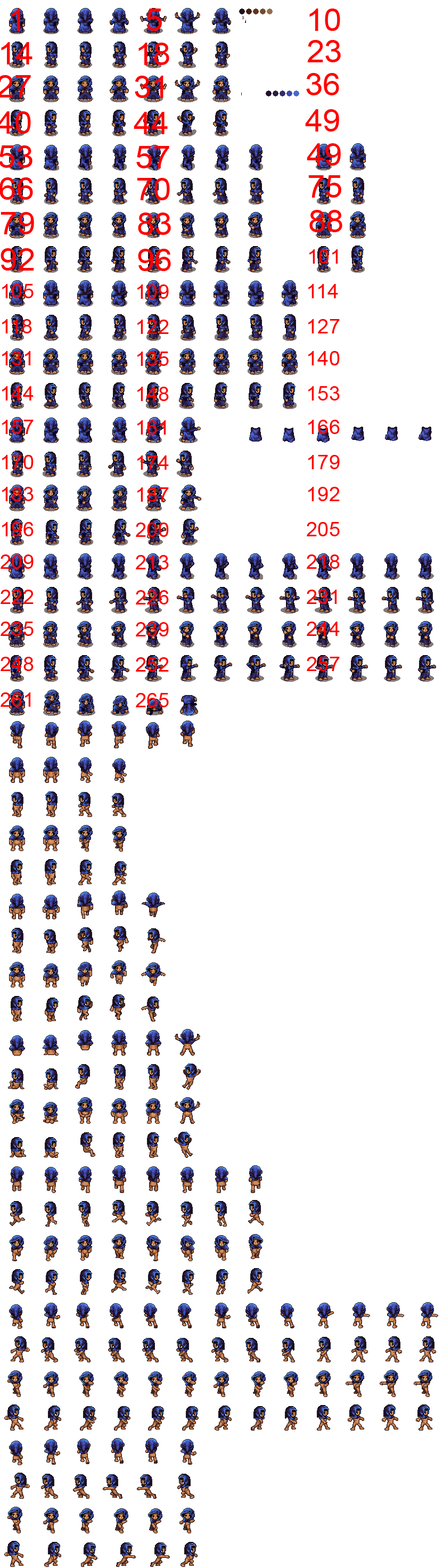
<style>
.page{position:relative;width:443px;height:1568px;background:#ffffff}
.page>*{position:absolute;margin:0}
.t1{font:32px "ArialMT";color:#ff0101}
.t2{font:20.4px "ArialMT";color:#ff0101}
</style>
<div class="page">
<p class="t1" style="left:11px;top:9px;width:9px;height:22px">1</p>
<p class="t1" style="left:146px;top:9px;width:16px;height:22px">5</p>
<p class="t1" style="left:309px;top:9px;width:31px;height:22px">10</p>
<p class="t1" style="left:307px;top:40px;width:34px;height:22px">23</p>
<p class="t1" style="left:1px;top:42px;width:31px;height:22px">14</p>
<p class="t1" style="left:138px;top:43px;width:31px;height:22px">18</p>
<p class="t1" style="left:135px;top:76px;width:29px;height:22px">31</p>
<p class="t1" style="left:306px;top:73px;width:33px;height:22px">36</p>
<p class="t1" style="left:134px;top:112px;width:34px;height:22px">44</p>
<p class="t1" style="left:305px;top:109px;width:34px;height:23px">49</p>
<p class="t1" style="left:0px;top:145px;width:32px;height:23px">53</p>
<p class="t1" style="left:136px;top:146px;width:33px;height:22px">57</p>
<p class="t1" style="left:307px;top:143px;width:34px;height:23px">49</p>
<p class="t1" style="left:0px;top:177px;width:33px;height:23px">66</p>
<p class="t1" style="left:137px;top:178px;width:33px;height:22px">70</p>
<p class="t1" style="left:308px;top:175px;width:33px;height:23px">75</p>
<p class="t1" style="left:309px;top:210px;width:33px;height:22px">88</p>
<p class="t1" style="left:1px;top:212px;width:33px;height:22px">79</p>
<p class="t1" style="left:138px;top:213px;width:33px;height:22px">83</p>
<p class="t1" style="left:1px;top:248px;width:33px;height:23px">92</p>
<p class="t1" style="left:138px;top:249px;width:33px;height:22px">96</p>
<p class="t2" style="left:309px;top:249px;width:29px;height:15px">101</p>
<p class="t2" style="left:2px;top:284px;width:32px;height:14px">105</p>
<p class="t2" style="left:137px;top:284px;width:32px;height:15px">109</p>
<p class="t2" style="left:308px;top:284px;width:30px;height:14px">114</p>
<p class="t2" style="left:2px;top:319px;width:30px;height:14px">118</p>
<p class="t2" style="left:137px;top:320px;width:32px;height:14px">122</p>
<p class="t2" style="left:308px;top:319px;width:32px;height:14px">127</p>
<p class="t2" style="left:2px;top:351px;width:29px;height:14px">131</p>
<p class="t2" style="left:137px;top:352px;width:32px;height:14px">135</p>
<p class="t2" style="left:308px;top:351px;width:32px;height:14px">140</p>
<p class="t2" style="left:2px;top:386px;width:32px;height:15px">144</p>
<p class="t2" style="left:137px;top:387px;width:32px;height:14px">148</p>
<p class="t2" style="left:308px;top:386px;width:32px;height:15px">153</p>
<p class="t2" style="left:2px;top:420px;width:32px;height:14px">157</p>
<p class="t2" style="left:137px;top:420px;width:29px;height:15px">161</p>
<p class="t2" style="left:308px;top:420px;width:32px;height:14px">166</p>
<p class="t2" style="left:2px;top:455px;width:32px;height:14px">170</p>
<p class="t2" style="left:137px;top:455px;width:32px;height:15px">174</p>
<p class="t2" style="left:308px;top:455px;width:32px;height:14px">179</p>
<p class="t2" style="left:2px;top:487px;width:32px;height:14px">183</p>
<p class="t2" style="left:137px;top:487px;width:32px;height:15px">187</p>
<p class="t2" style="left:308px;top:487px;width:32px;height:14px">192</p>
<p class="t2" style="left:2px;top:522px;width:32px;height:14px">196</p>
<p class="t2" style="left:307px;top:522px;width:33px;height:14px">205</p>
<p class="t2" style="left:136px;top:522px;width:33px;height:15px">200</p>
<p class="t2" style="left:1px;top:554px;width:33px;height:15px">209</p>
<p class="t2" style="left:136px;top:555px;width:33px;height:14px">213</p>
<p class="t2" style="left:307px;top:554px;width:33px;height:15px">218</p>
<p class="t2" style="left:1px;top:590px;width:33px;height:14px">222</p>
<p class="t2" style="left:136px;top:590px;width:33px;height:15px">226</p>
<p class="t2" style="left:307px;top:590px;width:30px;height:14px">231</p>
<p class="t2" style="left:1px;top:622px;width:33px;height:14px">235</p>
<p class="t2" style="left:136px;top:622px;width:33px;height:14px">239</p>
<p class="t2" style="left:307px;top:622px;width:33px;height:14px">244</p>
<p class="t2" style="left:1px;top:657px;width:33px;height:14px">248</p>
<p class="t2" style="left:136px;top:657px;width:33px;height:15px">252</p>
<p class="t2" style="left:307px;top:657px;width:33px;height:14px">257</p>
<p class="t2" style="left:1px;top:692px;width:30px;height:15px">261</p>
<p class="t2" style="left:136px;top:693px;width:33px;height:14px">265</p>
</div>
